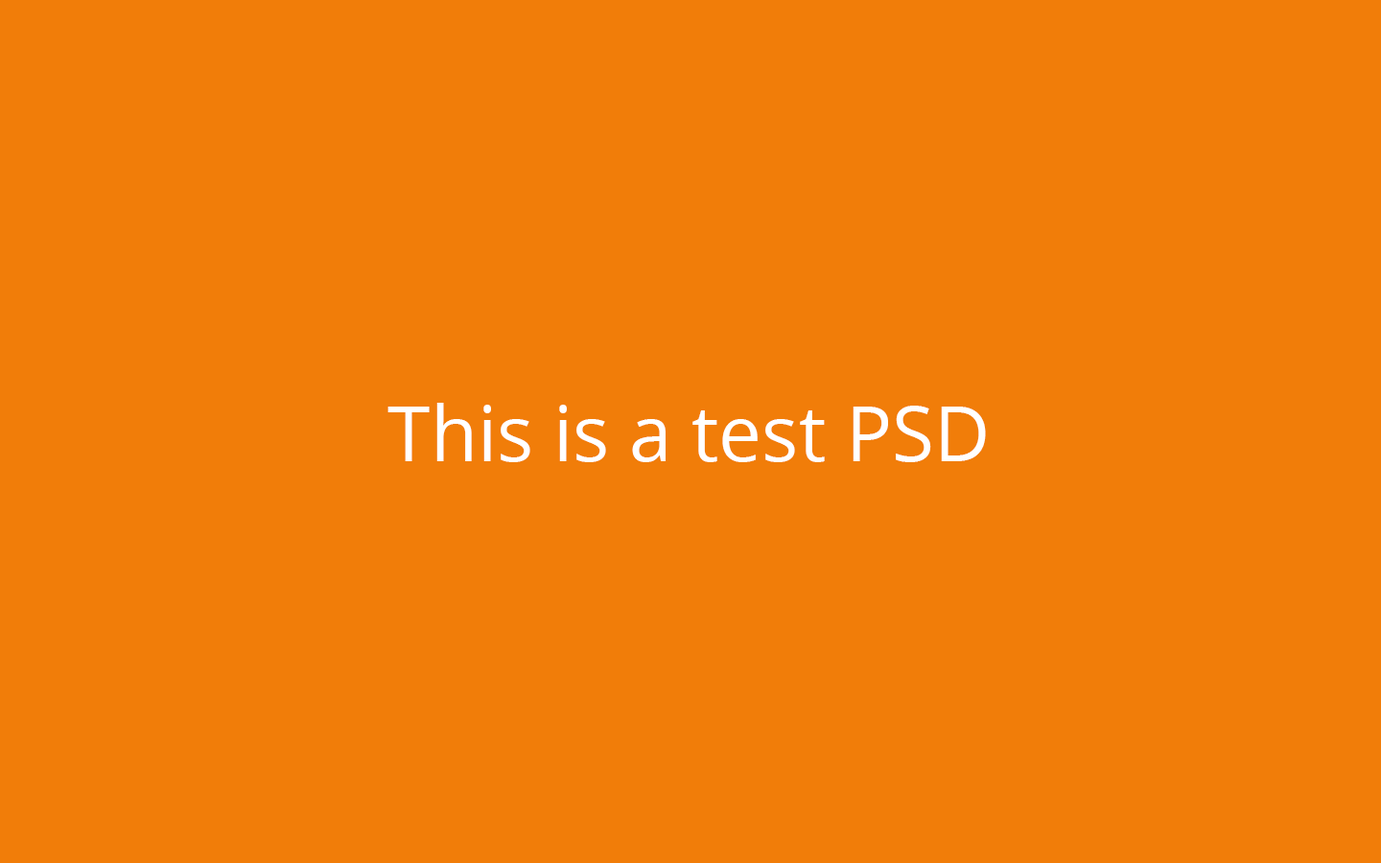
<style>
.page{position:relative;width:1381px;height:863px;background:#f17d09}
.page>*{position:absolute;margin:0}
.t1{font:76.7px "OpenSans";color:#ffffff}
</style>
<div class="page">
<p class="t1" style="left:388px;top:403px;width:598px;height:59px">This is a test PSD</p>
</div>
